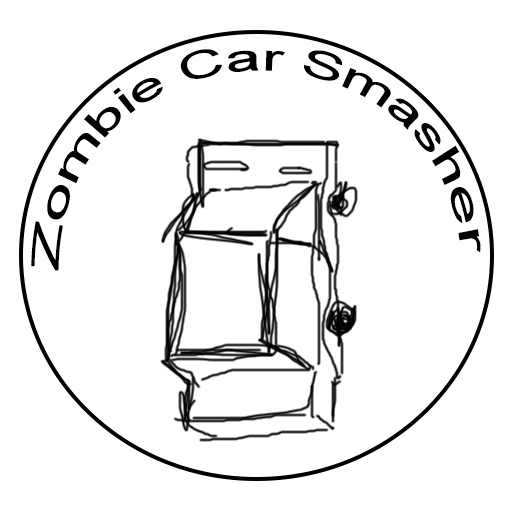
<style>
.page{position:relative;width:512px;height:512px;background:#ffffff}
.page>*{position:absolute;margin:0}
.t1{font:37.8px "ArialMT";color:#000000}
</style>
<div class="page">
<p class="t1" style="left:31px;top:49px;width:450px;height:222px">Zombie Car Smasher</p>
</div>
